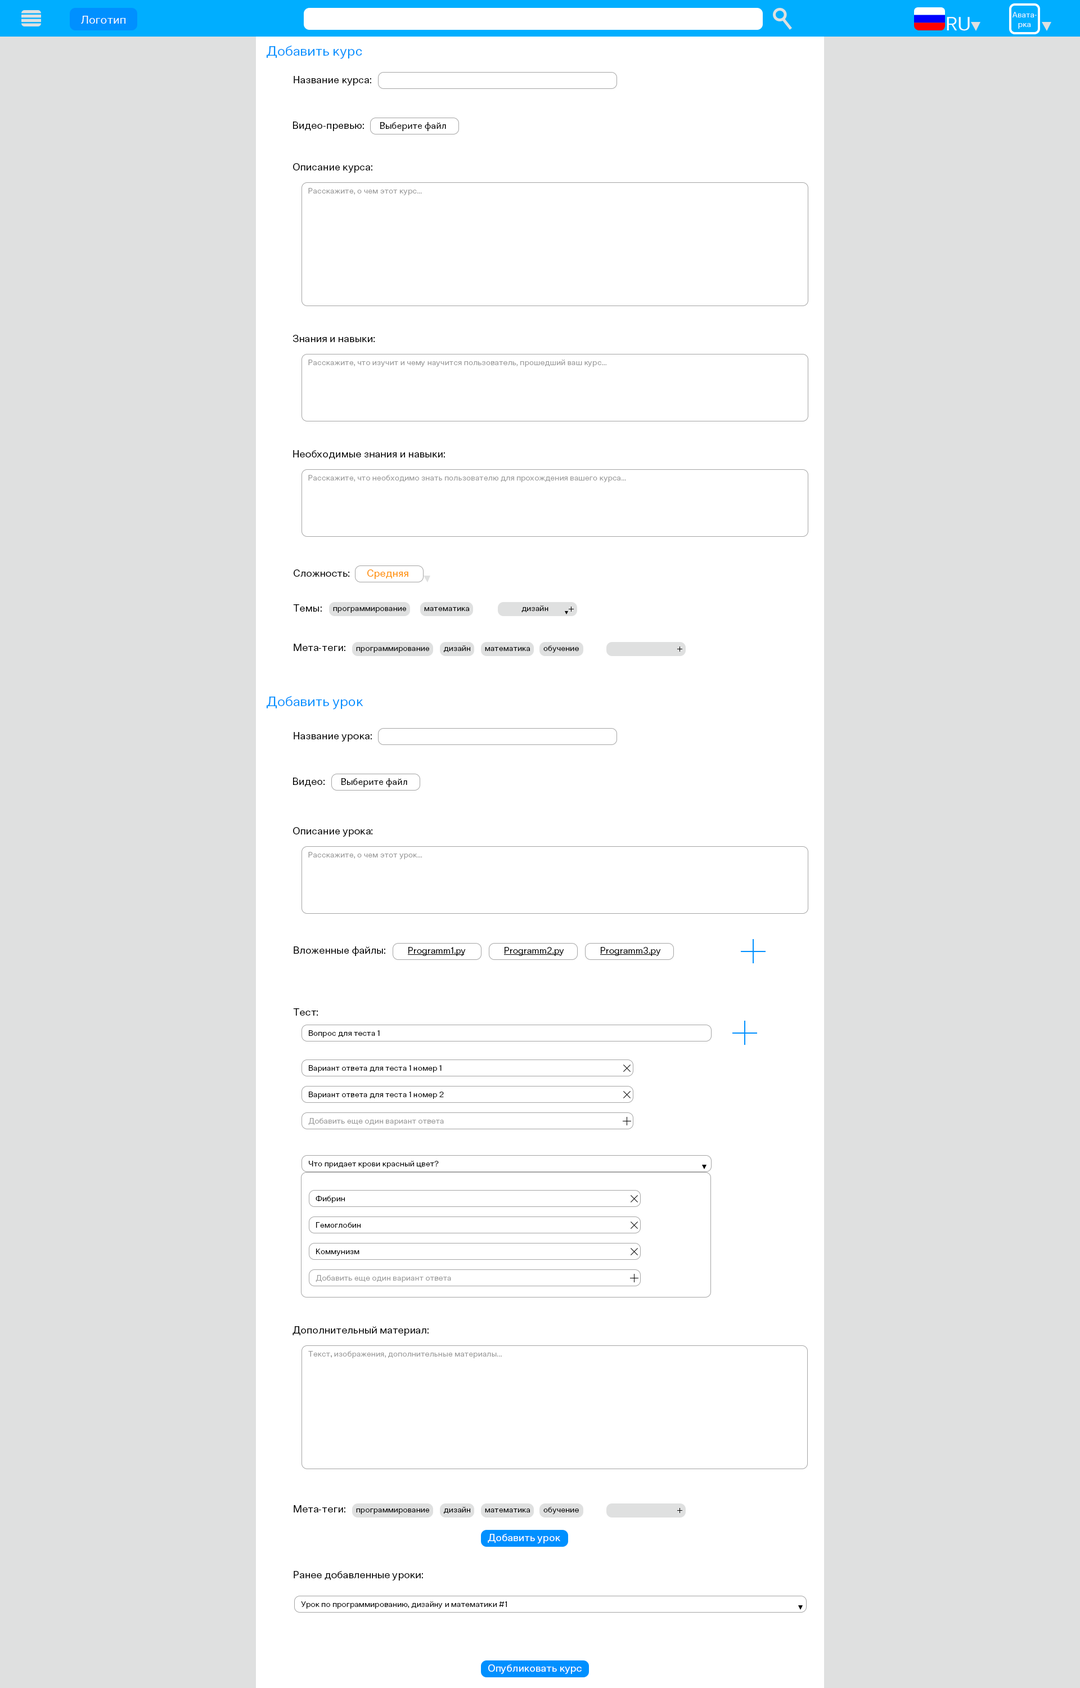
<style>
.page{position:relative;width:1080px;height:1688px;background:#ffffff}
.page>*{position:absolute;margin:0}
.t1{font:11.2px "ClinicaPro-Regular";color:#ffffff}
.t2{font:19.1px "ClinicaPro-Regular";color:#ffffff}
.t3{font:7.9px "ClinicaPro-Regular";color:#ffffff}
.t4{font:13.5px "ClinicaPro-Regular";color:#0090ff}
.t5{font:10.1px "ClinicaPro-Regular";color:#000000}
.t6{font:9px "ClinicaPro-Regular";color:#000000}
.t7{font:7.9px "ClinicaPro-Regular";color:#9a9a9a}
.t8{font:10.1px "ClinicaPro-Regular";color:#ff9000}
.t9{font:7.9px "ClinicaPro-Regular";color:#000000}
.t10{font:7.9px "ClinicaPro-Regular";color:#010101}
.t11{font:10.1px "ClinicaPro-Regular";color:#ffffff}
</style>
<div class="page">
<p class="t1" style="left:81px;top:16px;width:44px;height:8px">Логотип</p>
<p class="t2" style="left:947px;top:17px;width:23px;height:14px">RU</p>
<p class="t3" style="left:1012px;top:12px;width:25px;height:17px;text-align:center">Авата-<br>рка</p>
<p class="t4" style="left:267px;top:46px;width:95px;height:13px">Добавить курс</p>
<p class="t5" style="left:294px;top:76px;width:77px;height:10px">Название курса:</p>
<p class="t5" style="left:293px;top:122px;width:71px;height:9px">Видео-превью:</p>
<p class="t6" style="left:380px;top:122px;width:66px;height:9px">Выберите файл</p>
<p class="t5" style="left:293px;top:163px;width:79px;height:10px">Описание курса:</p>
<p class="t7" style="left:308px;top:188px;width:114px;height:7px">Расскажите, о чем этот курс...</p>
<p class="t5" style="left:293px;top:335px;width:82px;height:7px">Знания и навыки:</p>
<p class="t7" style="left:308px;top:359px;width:298px;height:8px">Расскажите, что изучит и чему научится пользователь, прошедший ваш курс...</p>
<p class="t5" style="left:293px;top:450px;width:152px;height:9px">Необходимые знания и навыки:</p>
<p class="t7" style="left:308px;top:475px;width:318px;height:7px">Расскажите, что необходимо знать пользователю для прохождения вашего курса...</p>
<p class="t5" style="left:294px;top:569px;width:55px;height:8px">Сложность:</p>
<p class="t8" style="left:367px;top:569px;width:41px;height:10px">Средняя</p>
<p class="t5" style="left:293px;top:604px;width:29px;height:7px">Темы:</p>
<p class="t9" style="left:521px;top:605px;width:27px;height:8px">дизайн</p>
<p class="t9" style="left:333px;top:607px;width:73px;height:6px">программирование</p>
<p class="t9" style="left:424px;top:607px;width:45px;height:4px">математика</p>
<p class="t5" style="left:294px;top:644px;width:51px;height:7px">Мета-теги:</p>
<p class="t9" style="left:356px;top:647px;width:73px;height:5px">программирование</p>
<p class="t9" style="left:444px;top:645px;width:26px;height:7px">дизайн</p>
<p class="t9" style="left:485px;top:647px;width:45px;height:4px">математика</p>
<p class="t9" style="left:543px;top:645px;width:36px;height:7px">обучение</p>
<p class="t4" style="left:267px;top:696px;width:96px;height:13px">Добавить урок</p>
<p class="t5" style="left:294px;top:732px;width:78px;height:9px">Название урока:</p>
<p class="t5" style="left:293px;top:777px;width:32px;height:9px">Видео:</p>
<p class="t6" style="left:341px;top:778px;width:66px;height:9px">Выберите файл</p>
<p class="t5" style="left:293px;top:827px;width:79px;height:9px">Описание урока:</p>
<p class="t7" style="left:308px;top:852px;width:114px;height:7px">Расскажите, о чем этот урок...</p>
<p class="t5" style="left:294px;top:946px;width:91px;height:10px">Вложенные файлы:</p>
<p class="t6" style="left:408px;top:947px;width:58px;height:9px">Programm1.py</p>
<p class="t6" style="left:505px;top:947px;width:59px;height:9px">Programm2.py</p>
<p class="t6" style="left:601px;top:947px;width:60px;height:9px">Programm3.py</p>
<p class="t5" style="left:293px;top:1008px;width:25px;height:7px">Тест:</p>
<p class="t9" style="left:309px;top:1030px;width:71px;height:7px">Вопрос для теста 1</p>
<p class="t9" style="left:309px;top:1065px;width:133px;height:7px">Вариант ответа для теста 1 номер 1</p>
<p class="t9" style="left:309px;top:1091px;width:135px;height:8px">Вариант ответа для теста 1 номер 2</p>
<p class="t7" style="left:308px;top:1118px;width:136px;height:7px">Добавить еще один вариант ответа</p>
<p class="t9" style="left:309px;top:1160px;width:130px;height:8px">Что придает крови красный цвет?</p>
<p class="t10" style="left:316px;top:1195px;width:29px;height:8px">Фибрин</p>
<p class="t9" style="left:316px;top:1222px;width:45px;height:5px">Гемоглобин</p>
<p class="t9" style="left:316px;top:1248px;width:43px;height:8px">Коммунизм</p>
<p class="t7" style="left:316px;top:1275px;width:135px;height:7px">Добавить еще один вариант ответа</p>
<p class="t5" style="left:292px;top:1326px;width:137px;height:9px">Дополнительный материал:</p>
<p class="t7" style="left:308px;top:1351px;width:194px;height:7px">Текст, изображения, дополнительные материалы...</p>
<p class="t5" style="left:294px;top:1505px;width:51px;height:7px">Мета-теги:</p>
<p class="t9" style="left:356px;top:1508px;width:73px;height:6px">программирование</p>
<p class="t9" style="left:444px;top:1506px;width:26px;height:8px">дизайн</p>
<p class="t9" style="left:485px;top:1508px;width:45px;height:4px">математика</p>
<p class="t9" style="left:543px;top:1506px;width:36px;height:8px">обучение</p>
<p class="t11" style="left:488px;top:1533px;width:72px;height:10px">Добавить урок</p>
<p class="t5" style="left:294px;top:1570px;width:129px;height:10px">Ранее добавленные уроки:</p>
<p class="t9" style="left:301px;top:1601px;width:206px;height:7px">Урок по программированию, дизайну и математики #1</p>
<p class="t11" style="left:488px;top:1664px;width:94px;height:9px">Опубликовать курс</p>
</div>
